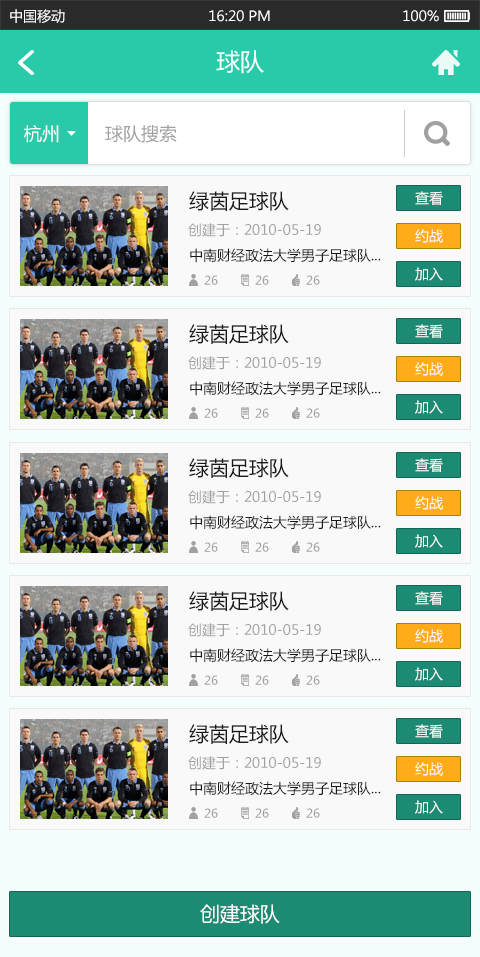
<style>
.page{position:relative;width:480px;height:957px;background:#f9f9f9}
.page>*{position:absolute;margin:0}
.t1{font:14px "MicrosoftYaHei";color:#ffffff}
.t2{font:24px "MicrosoftYaHei";color:#f4fffd}
.t3{font:18px "MicrosoftYaHei";color:#ffffff}
.t4{font:18px "MicrosoftYaHei";color:#a0a0a0}
.t5{font:20px "MicrosoftYaHei";color:#191919}
.t6{font:14px "MicrosoftYaHei";color:#a1a1a1}
.t7{font:14px "MicrosoftYaHei";color:#191919}
.t8{font:12px "MicrosoftYaHei";color:#a1a1a1}
.t9{font:20px "MicrosoftYaHei";color:#ffffff}
</style>
<div class="page">
<p class="t1" style="left:10px;top:9px;width:55px;height:14px">中国移动</p>
<p class="t1" style="left:209px;top:10px;width:61px;height:12px">16:20 PM</p>
<p class="t1" style="left:403px;top:10px;width:36px;height:12px">100%</p>
<p class="t2" style="left:216px;top:50px;width:48px;height:24px">球队</p>
<p class="t3" style="left:24px;top:125px;width:35px;height:18px">杭州</p>
<p class="t4" style="left:105px;top:125px;width:72px;height:18px">球队搜索</p>
<p class="t5" style="left:189px;top:191px;width:100px;height:20px">绿茵足球队</p>
<p class="t1" style="left:415px;top:191px;width:28px;height:14px">查看</p>
<p class="t6" style="left:188px;top:223px;width:133px;height:14px">创建于：2010-05-19</p>
<p class="t1" style="left:415px;top:229px;width:28px;height:14px">约战</p>
<p class="t7" style="left:190px;top:248px;width:191px;height:15px">中南财经政法大学男子足球队...</p>
<p class="t1" style="left:415px;top:267px;width:28px;height:14px">加入</p>
<p class="t8" style="left:204px;top:275px;width:14px;height:10px">26</p>
<p class="t8" style="left:255px;top:275px;width:14px;height:10px">26</p>
<p class="t8" style="left:306px;top:275px;width:14px;height:10px">26</p>
<p class="t5" style="left:189px;top:324px;width:100px;height:20px">绿茵足球队</p>
<p class="t1" style="left:415px;top:324px;width:28px;height:14px">查看</p>
<p class="t6" style="left:188px;top:356px;width:133px;height:14px">创建于：2010-05-19</p>
<p class="t1" style="left:415px;top:362px;width:28px;height:14px">约战</p>
<p class="t7" style="left:190px;top:381px;width:191px;height:15px">中南财经政法大学男子足球队...</p>
<p class="t1" style="left:415px;top:400px;width:28px;height:14px">加入</p>
<p class="t8" style="left:204px;top:408px;width:14px;height:10px">26</p>
<p class="t8" style="left:255px;top:408px;width:14px;height:10px">26</p>
<p class="t8" style="left:306px;top:408px;width:14px;height:10px">26</p>
<p class="t5" style="left:189px;top:458px;width:100px;height:20px">绿茵足球队</p>
<p class="t1" style="left:415px;top:458px;width:28px;height:14px">查看</p>
<p class="t6" style="left:188px;top:490px;width:133px;height:14px">创建于：2010-05-19</p>
<p class="t1" style="left:415px;top:496px;width:28px;height:14px">约战</p>
<p class="t7" style="left:190px;top:515px;width:191px;height:15px">中南财经政法大学男子足球队...</p>
<p class="t1" style="left:415px;top:534px;width:28px;height:14px">加入</p>
<p class="t8" style="left:204px;top:542px;width:14px;height:10px">26</p>
<p class="t8" style="left:255px;top:542px;width:14px;height:10px">26</p>
<p class="t8" style="left:306px;top:542px;width:14px;height:10px">26</p>
<p class="t5" style="left:189px;top:591px;width:100px;height:20px">绿茵足球队</p>
<p class="t1" style="left:415px;top:591px;width:28px;height:14px">查看</p>
<p class="t6" style="left:188px;top:623px;width:133px;height:14px">创建于：2010-05-19</p>
<p class="t1" style="left:415px;top:629px;width:28px;height:14px">约战</p>
<p class="t7" style="left:190px;top:648px;width:191px;height:15px">中南财经政法大学男子足球队...</p>
<p class="t8" style="left:204px;top:675px;width:14px;height:10px">26</p>
<p class="t8" style="left:255px;top:675px;width:14px;height:10px">26</p>
<p class="t8" style="left:306px;top:675px;width:14px;height:10px">26</p>
<p class="t1" style="left:415px;top:667px;width:28px;height:14px">加入</p>
<p class="t5" style="left:189px;top:724px;width:100px;height:20px">绿茵足球队</p>
<p class="t1" style="left:415px;top:724px;width:28px;height:14px">查看</p>
<p class="t6" style="left:188px;top:756px;width:133px;height:14px">创建于：2010-05-19</p>
<p class="t1" style="left:415px;top:762px;width:28px;height:14px">约战</p>
<p class="t7" style="left:190px;top:781px;width:191px;height:15px">中南财经政法大学男子足球队...</p>
<p class="t8" style="left:204px;top:808px;width:14px;height:10px">26</p>
<p class="t8" style="left:255px;top:808px;width:14px;height:10px">26</p>
<p class="t8" style="left:306px;top:808px;width:14px;height:10px">26</p>
<p class="t1" style="left:415px;top:800px;width:28px;height:14px">加入</p>
<p class="t9" style="left:200px;top:904px;width:80px;height:20px">创建球队</p>
</div>
